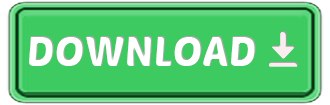
<style>
.page{position:relative;width:330px;height:105px;background:#3dcb61}
.page>*{position:absolute;margin:0}
.t1{font:42.4px "PoetsenOne-Regular";color:#ffffff;text-transform:uppercase}
</style>
<div class="page">
<p class="t1" style="left:29px;top:36px;width:227px;height:30px">Download</p>
</div>
